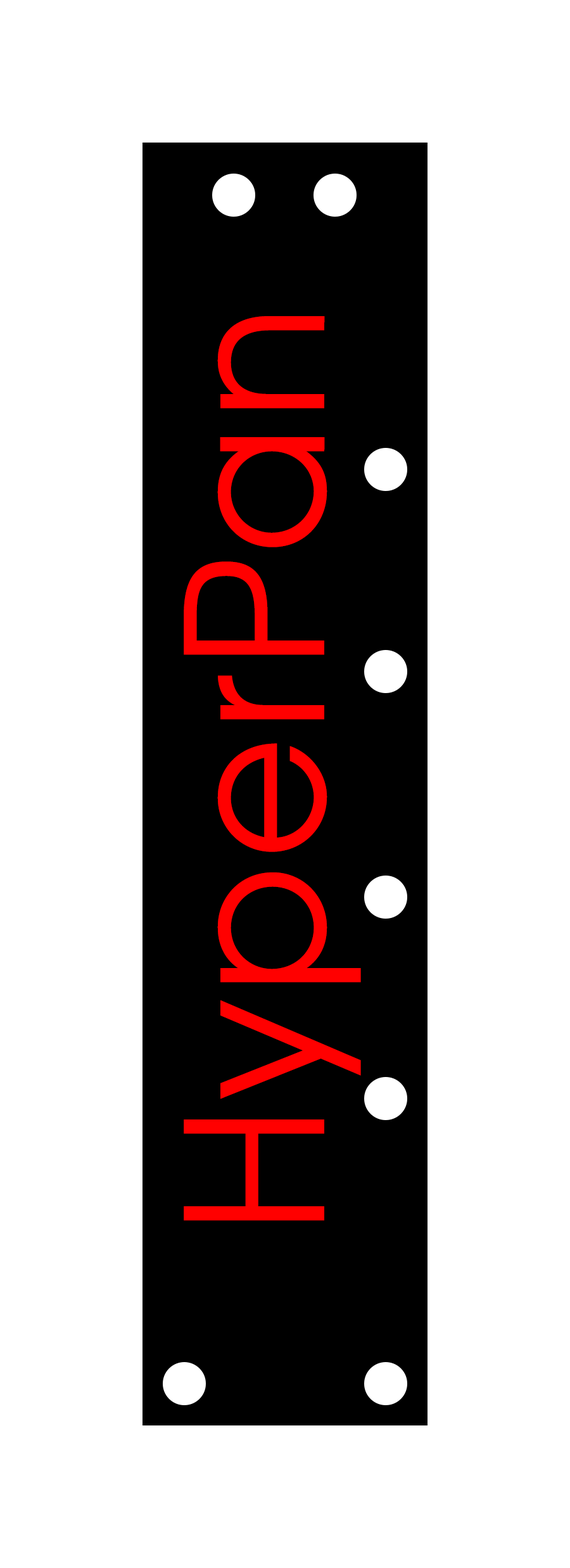
<style>
.page{position:relative;width:570px;height:1568px;background:#ffffff}
.page>*{position:absolute;margin:0}
.t1{font:190.1px "TeXGyreAdventor-Regular";letter-spacing:0.025em;color:#ff0000}
</style>
<div class="page">
<p class="t1" style="left:184px;top:316px;width:177px;height:905px;rotate:-90deg">HyperPan</p>
</div>
